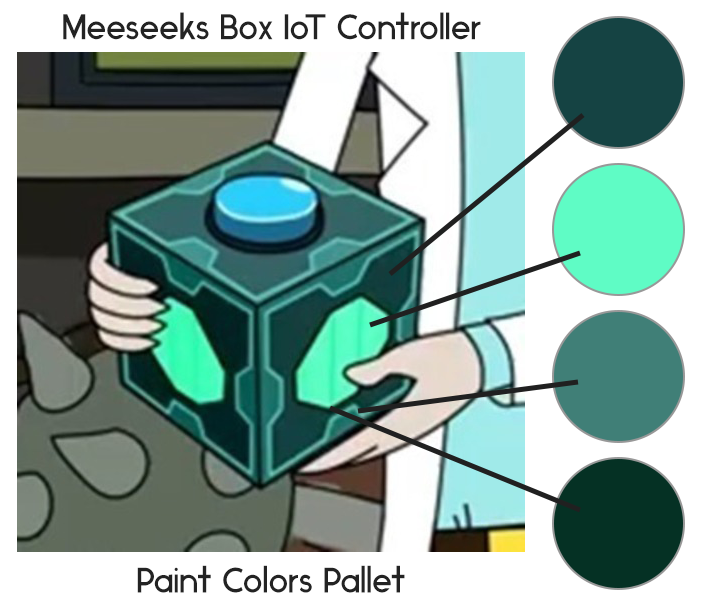
<style>
.page{position:relative;width:711px;height:605px;background:#ffffff}
.page>*{position:absolute;margin:0}
.t1{font:35.6px "Ikaros-Regular";color:#232323}
</style>
<div class="page">
<p class="t1" style="left:63px;top:12px;width:418px;height:28px">Meeseeks Box IoT Controller</p>
<p class="t1" style="left:137px;top:565px;width:268px;height:28px">Paint Colors Pallet</p>
</div>
